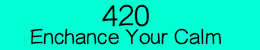
<style>
.page{position:relative;width:260px;height:50px;background:#00ffd2}
.page>*{position:absolute;margin:0}
.t1{font:29.2px "YuppyTC-Regular";color:#000000}
.t2{font:20.8px "YuppyTC-Regular";color:#000000}
</style>
<div class="page">
<p class="t1" style="left:102px;top:4px;width:47px;height:23px">420</p>
<p class="t2" style="left:30px;top:28px;width:191px;height:17px">Enchance Your Calm</p>
</div>
